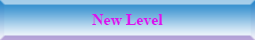
<style>
.page{position:relative;width:255px;height:40px}
.page>*{position:absolute;margin:0}
.t1{font:15.8px "TimesNewRomanPS-BoldMT";color:#d815ed}
</style>
<div class="page">
<p class="t1" style="left:92px;top:14px;width:71px;height:11px">New Level</p>
</div>
